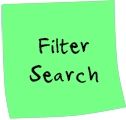
<style>
.page{position:relative;width:126px;height:120px;background:#75ff85}
.page>*{position:absolute;margin:0}
.t1{font:24px "Ampersand";color:#000000}
</style>
<div class="page">
<p class="t1" style="left:29px;top:37px;width:70px;height:46px;text-align:center">Filter<br>Search</p>
</div>
